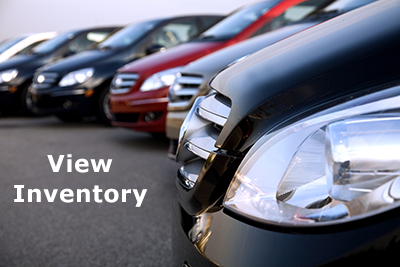
<style>
.page{position:relative;width:400px;height:267px}
.page>*{position:absolute;margin:0}
.t1{font:23.3px/30px "Verdana-Bold";letter-spacing:0.025em;color:#ffffff}
</style>
<div class="page">
<p class="t1" style="left:14px;top:154px;width:134px;height:53px;text-align:center">View<br>Inventory</p>
</div>
